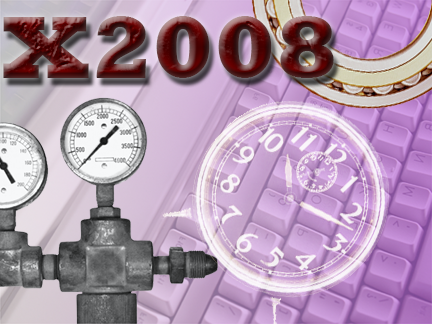
<style>
.page{position:relative;width:432px;height:324px}
.page>*{position:absolute;margin:0}
.t1{font:90px "Rockwell-ExtraBold"}
</style>
<div class="page">
<p class="t1" style="left:3px;top:16px;width:331px;height:62px">X2008</p>
</div>
